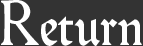
<style>
.page{position:relative;width:143px;height:46px;background:#333333}
.page>*{position:absolute;margin:0}
.t1{font:62.5px "Hamlet-Tertia18";color:#ffffff}
</style>
<div class="page">
<p class="t1" style="left:1px;top:0px;width:141px;height:46px">Return</p>
</div>
